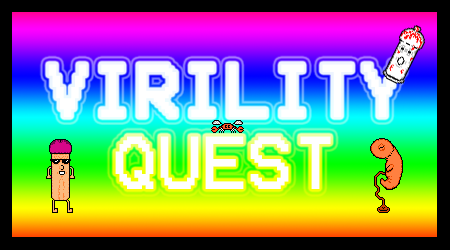
<style>
.page{position:relative;width:450px;height:250px}
.page>*{position:absolute;margin:0}
.t1{font:60px "Terminal";color:#ffffff}
</style>
<div class="page">
<p class="t1" style="left:48px;top:64px;width:354px;height:125px;text-align:center">VIRILITY<br>QUEST</p>
</div>
